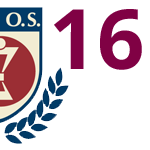
<style>
.page{position:relative;width:150px;height:150px;background:#ffffff}
.page>*{position:absolute;margin:0}
.t1{font:83.3px "OpenSans-Bold";color:#800144;text-transform:uppercase}
</style>
<div class="page">
<p class="t1" style="left:54px;top:9px;width:88px;height:61px">16</p>
</div>
